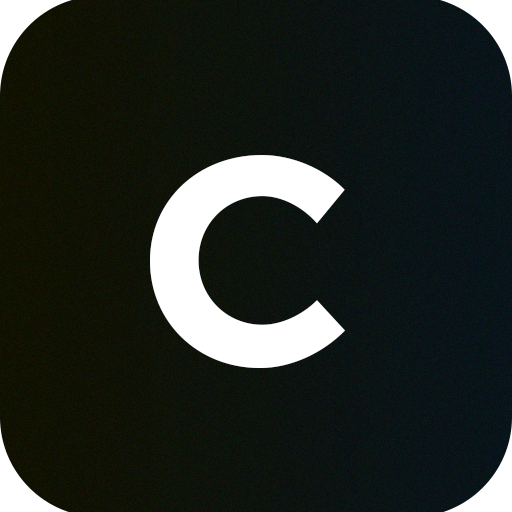
<style>
.page{position:relative;width:512px;height:512px}
.page>*{position:absolute;margin:0}
.t1{font:300px "Montserrat-SemiBold";color:#ffffff}
</style>
<div class="page">
<p class="t1" style="left:150px;top:155px;width:195px;height:214px">C</p>
</div>
